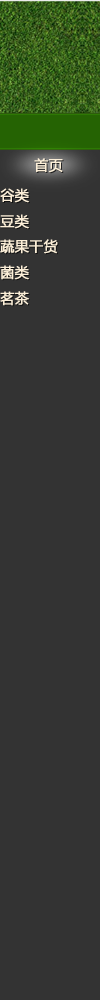
<style>
.page{position:relative;width:100px;height:1000px;background:#333333}
.page>*{position:absolute;margin:0}
.t1{font:14px "MicrosoftYaHei";color:#fcefd8;font-weight:bold}
</style>
<div class="page">
<p class="t1" style="left:34px;top:158px;width:29px;height:15px">首页</p>
<p class="t1" style="left:0px;top:188px;width:29px;height:15px">谷类</p>
<p class="t1" style="left:0px;top:214px;width:29px;height:15px">豆类</p>
<p class="t1" style="left:0px;top:239px;width:58px;height:15px">蔬果干货</p>
<p class="t1" style="left:0px;top:265px;width:29px;height:15px">菌类</p>
<p class="t1" style="left:0px;top:291px;width:29px;height:15px">茗茶</p>
</div>
